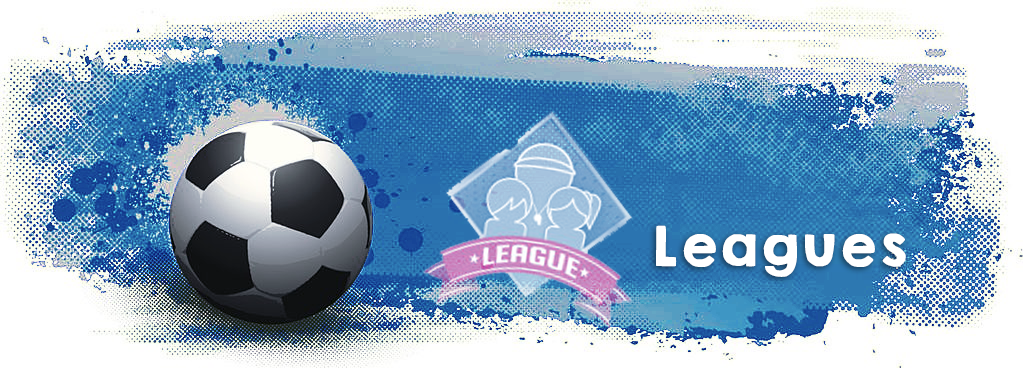
<style>
.page{position:relative;width:1023px;height:368px}
.page>*{position:absolute;margin:0}
.t1{font:50px "KGHAPPYSolid";color:#ffffff}
</style>
<div class="page">
<p class="t1" style="left:656px;top:225px;width:250px;height:52px">Leagues</p>
</div>
